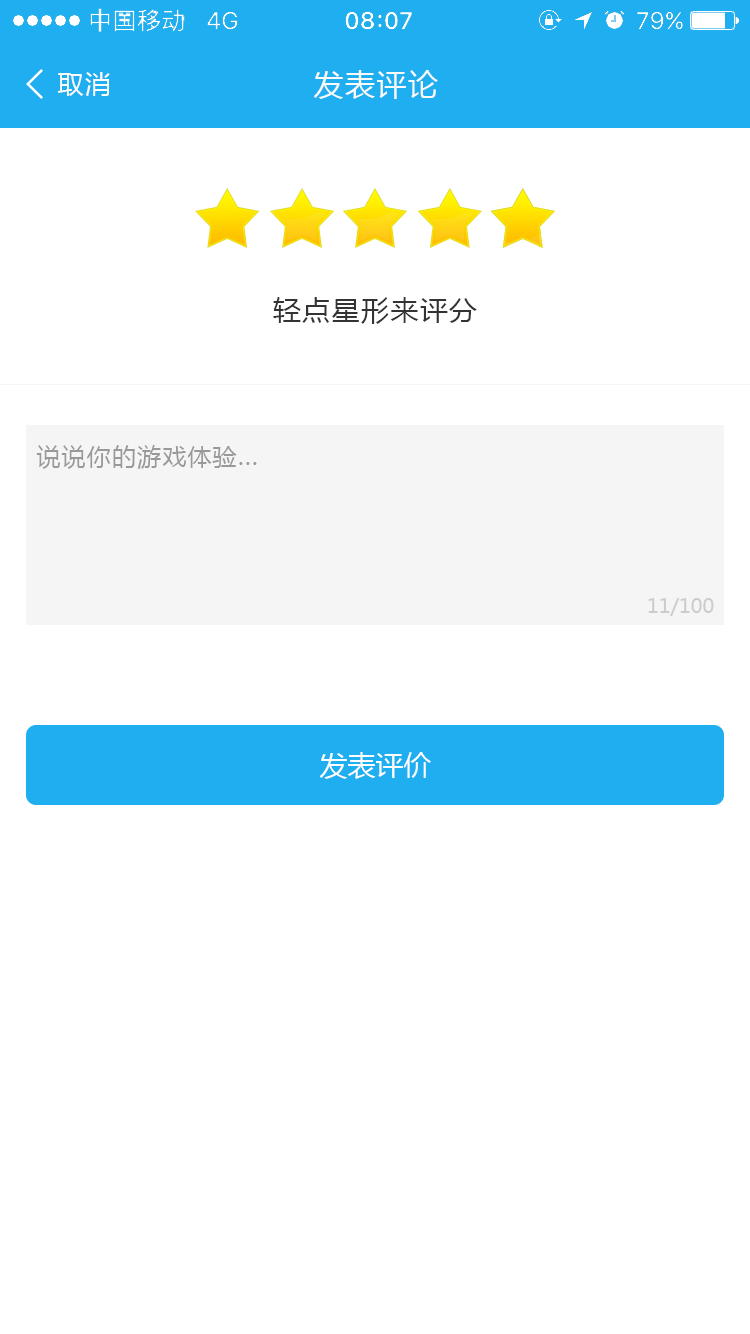
<style>
.page{position:relative;width:750px;height:1334px;background:#ffffff}
.page>*{position:absolute;margin:0}
.t1{font:26px "MicrosoftYaHei";letter-spacing:0.05em;color:#fafafa}
.t2{font:30px "MicrosoftYaHei";letter-spacing:0.05em;color:#fafafa}
.t3{font:28px "MicrosoftYaHei";letter-spacing:0.05em;color:#333333}
.t4{font:24px "MicrosoftYaHei";letter-spacing:0.05em;color:#999999}
.t5{font:20px "MicrosoftYaHei";color:#cccccc}
.t6{font:28px "MicrosoftYaHei";color:#ffffff}
</style>
<div class="page">
<p class="t1" style="left:57px;top:72px;width:53px;height:24px">取消</p>
<p class="t2" style="left:313px;top:70px;width:125px;height:29px">发表评论</p>
<p class="t3" style="left:273px;top:297px;width:204px;height:27px">轻点星形来评分</p>
<p class="t4" style="left:36px;top:445px;width:221px;height:24px">说说你的游戏体验...</p>
<p class="t5" style="left:648px;top:598px;width:66px;height:18px">11/100</p>
<p class="t6" style="left:319px;top:752px;width:112px;height:27px">发表评价</p>
</div>
